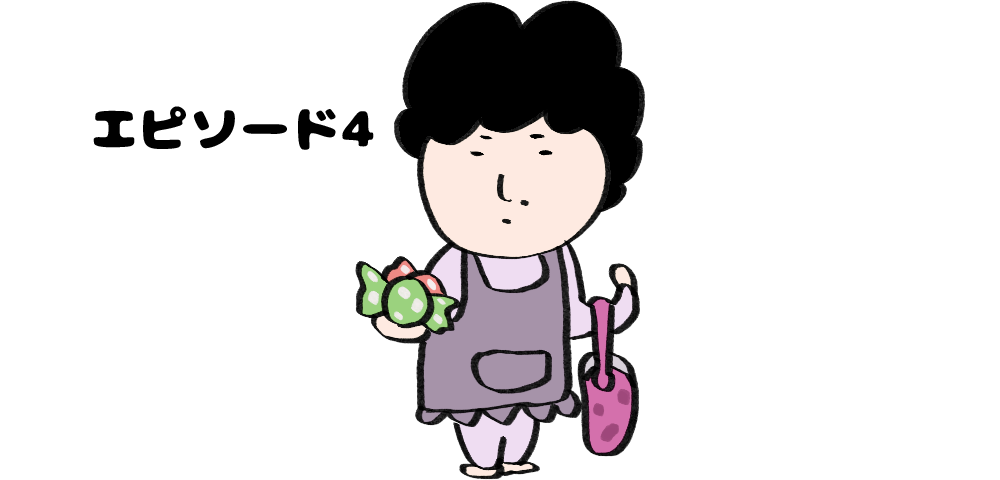
<style>
.page{position:relative;width:1000px;height:480px;background:#ffffff}
.page>*{position:absolute;margin:0}
.t1{font:50px "07NikumaruFont";letter-spacing:0.08em;color:#000000}
</style>
<div class="page">
<p class="t1" style="left:93px;top:106px;width:281px;height:44px">エピソード4</p>
</div>
